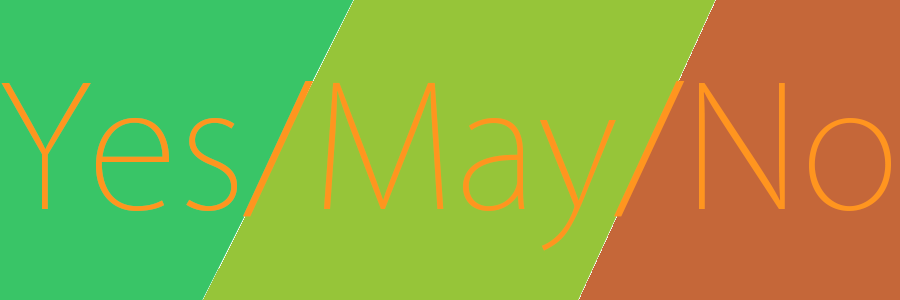
<style>
.page{position:relative;width:900px;height:300px;background:#96c539}
.page>*{position:absolute;margin:0}
.t1{font:166.7px "KozGoPro-ExtraLight";color:#ff951f}
</style>
<div class="page">
<p class="t1" style="left:1px;top:81px;width:890px;height:170px">Yes/May/No</p>
</div>
